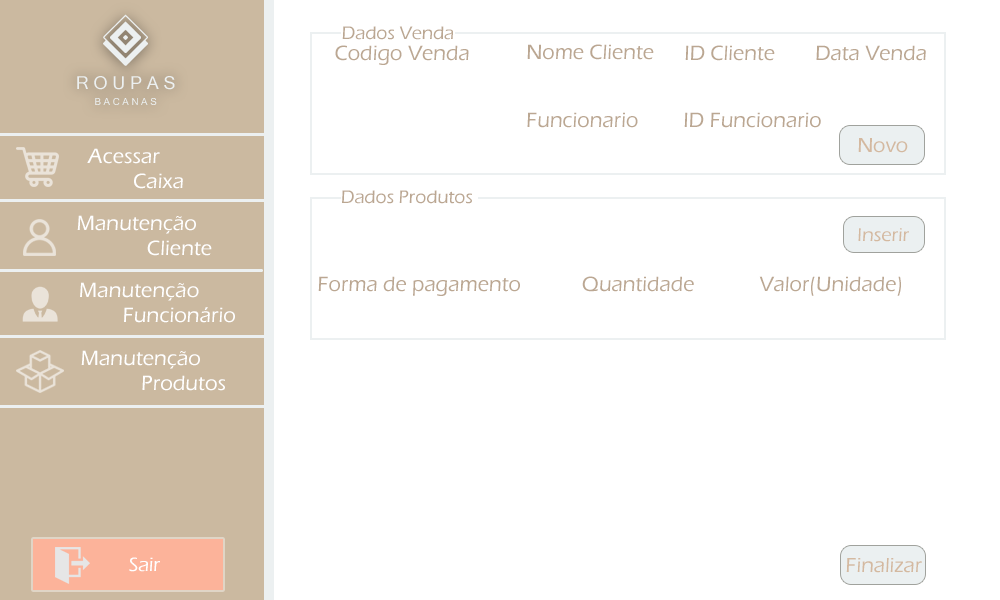
<style>
.page{position:relative;width:1000px;height:600px;background:#ffffff}
.page>*{position:absolute;margin:0}
.t1{font:18.7px "ErasITC-Medium";color:#bba792}
.t2{font:21.5px "ErasITC-Medium";color:#bba792}
.t3{font:17.8px "MicrosoftSansSerif";color:#ecf0f1}
.t4{font:9.7px "MicrosoftSansSerif";color:#ecf0f1}
.t5{font:21.3px "ErasITC-Medium";color:#ffffff}
.t6{font:20.9px "ErasITC-Medium";color:#d4b9a0}
.t7{font:19.3px "ErasITC-Medium";color:#d4b9a0}
.t8{font:20px "ErasITC-Medium";color:#ffffff}
</style>
<div class="page">
<p class="t1" style="left:342px;top:26px;width:111px;height:14px">Dados Venda</p>
<p class="t2" style="left:335px;top:45px;width:134px;height:20px">Codigo Venda</p>
<p class="t2" style="left:527px;top:44px;width:127px;height:16px">Nome Cliente</p>
<p class="t2" style="left:685px;top:45px;width:90px;height:16px">ID Cliente</p>
<p class="t2" style="left:816px;top:45px;width:110px;height:16px">Data Venda</p>
<p class="t3" style="left:77px;top:76px;width:98px;height:14px">R O U P A S</p>
<p class="t4" style="left:95px;top:98px;width:62px;height:7px">B A C A N A S</p>
<p class="t2" style="left:527px;top:112px;width:111px;height:16px">Funcionario</p>
<p class="t2" style="left:684px;top:112px;width:137px;height:16px">ID Funcionario</p>
<p class="t5" style="left:87px;top:148px;width:96px;height:41px;text-align:center">Acessar<br>             Caixa</p>
<p class="t6" style="left:858px;top:138px;width:50px;height:15px">Novo</p>
<p class="t1" style="left:342px;top:190px;width:130px;height:14px">Dados Produtos</p>
<p class="t5" style="left:77px;top:215px;width:135px;height:41px;text-align:center">Manutenção<br>                      Cliente</p>
<p class="t7" style="left:858px;top:228px;width:51px;height:14px">Inserir</p>
<p class="t2" style="left:318px;top:276px;width:202px;height:20px">Forma de pagamento</p>
<p class="t2" style="left:582px;top:276px;width:112px;height:16px">Quantidade</p>
<p class="t2" style="left:759px;top:276px;width:142px;height:20px">Valor(Unidade)</p>
<p class="t5" style="left:80px;top:282px;width:155px;height:41px;text-align:center">Manutenção <br>                       Funcionário</p>
<p class="t5" style="left:81px;top:350px;width:144px;height:41px;text-align:center">Manutenção <br>                         Produtos</p>
<p class="t8" style="left:129px;top:557px;width:31px;height:15px">Sair</p>
<p class="t6" style="left:846px;top:558px;width:76px;height:15px">Finalizar</p>
</div>
